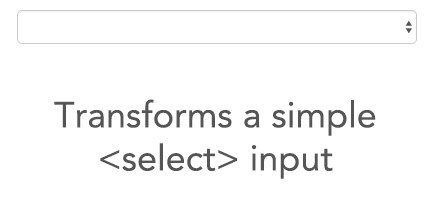
<style>
.page{position:relative;width:432px;height:214px;background:#ffffff}
.page>*{position:absolute;margin:0}
.t1{font:36px "Avenir-Roman";color:#555555}
</style>
<div class="page">
<p class="t1" style="left:54px;top:99px;width:322px;height:80px;text-align:center">Transforms a simple<br>&lt;select&gt; input</p>
</div>
